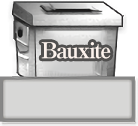
<style>
.page{position:relative;width:138px;height:126px}
.page>*{position:absolute;margin:0}
.t1{font:22px "RyuminPro-ExBold";letter-spacing:-0.08em;color:#fdf3ed}
</style>
<div class="page">
<p class="t1" style="left:41px;top:42px;width:70px;height:17px">Bauxite</p>
</div>
